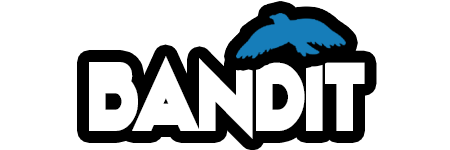
<style>
.page{position:relative;width:450px;height:150px;background:#ffffff}
.page>*{position:absolute;margin:0}
.t1{font:100px "KiloGram";color:#ffffff;scale:0.78 1}
</style>
<div class="page">
<p class="t1" style="left:89px;top:56px;width:276px;height:83px">BANDIT</p>
</div>
